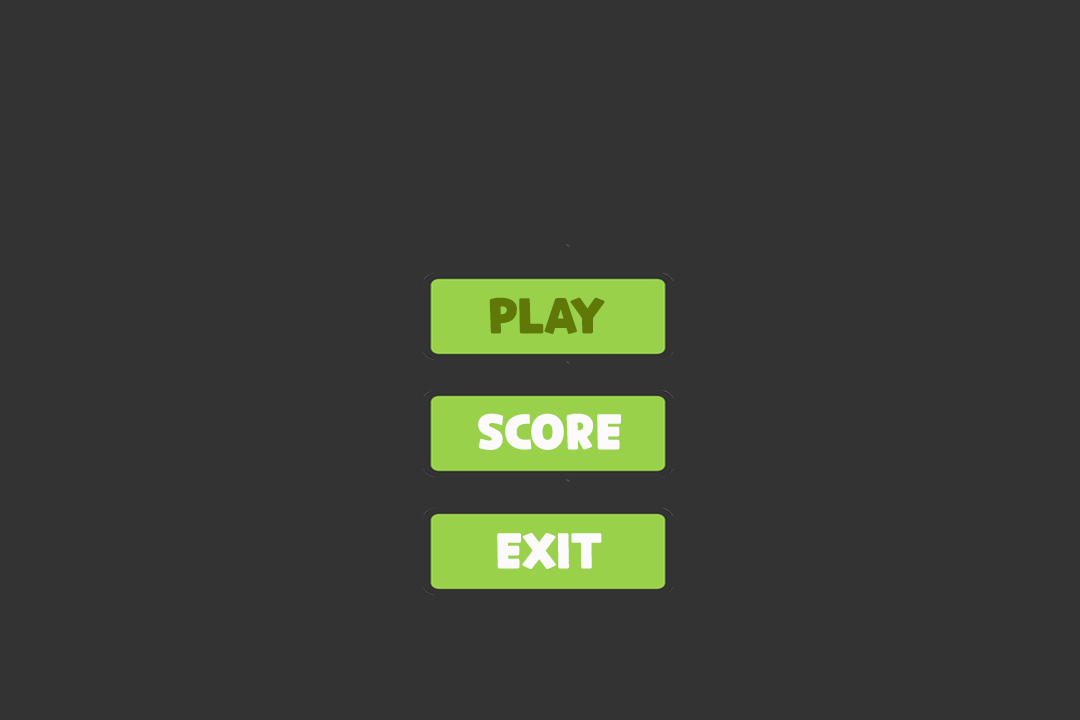
<style>
.page{position:relative;width:1080px;height:720px;background:#333333}
.page>*{position:absolute;margin:0}
.t1{font:48px "CookieRun-Black";color:#5f7807}
.t2{font:48px "CookieRun-Black";color:#fcfafa}
</style>
<div class="page">
<p class="t1" style="left:489px;top:297px;width:116px;height:37px">PLAY</p>
<p class="t2" style="left:478px;top:413px;width:143px;height:37px">SCORE</p>
<p class="t2" style="left:497px;top:533px;width:105px;height:36px">EXIT</p>
</div>
